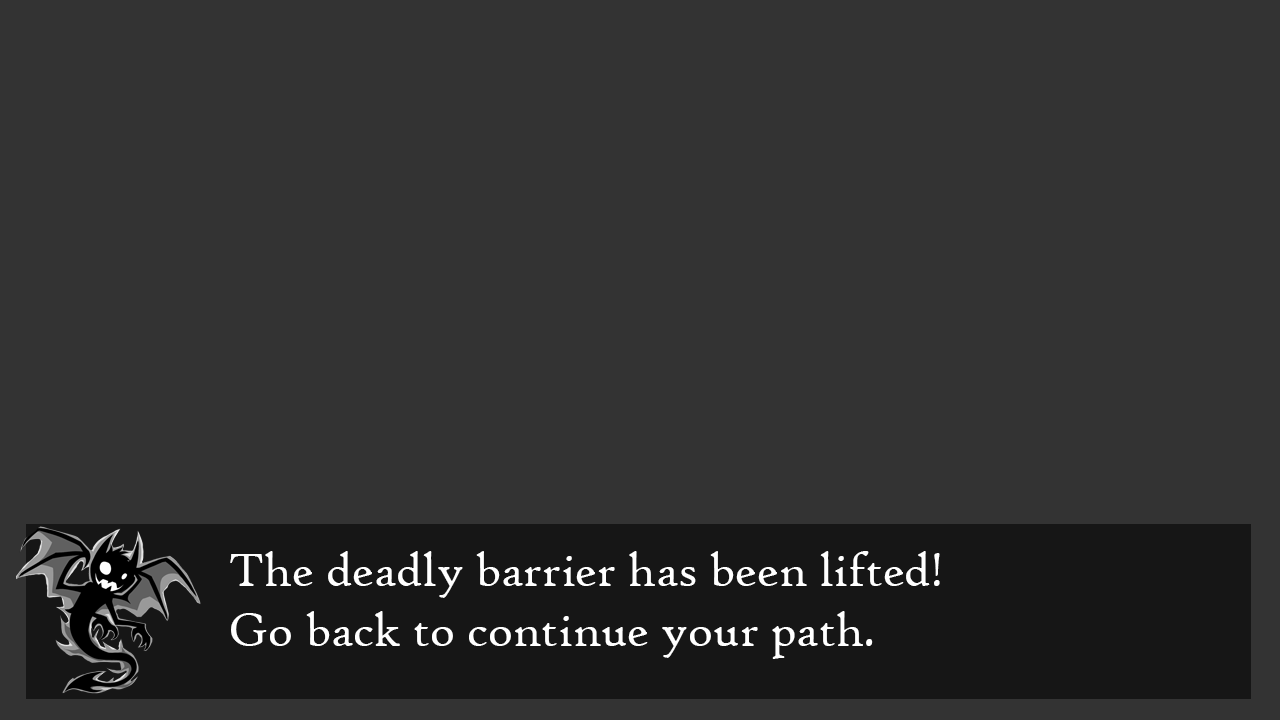
<style>
.page{position:relative;width:1280px;height:720px;background:#333333}
.page>*{position:absolute;margin:0}
.t1{font:50px "HighTowerText-Reg";color:#ffffff}
</style>
<div class="page">
<p class="t1" style="left:230px;top:551px;width:710px;height:108px">The deadly barrier has been lifted! <br>Go back to continue your path.</p>
</div>
